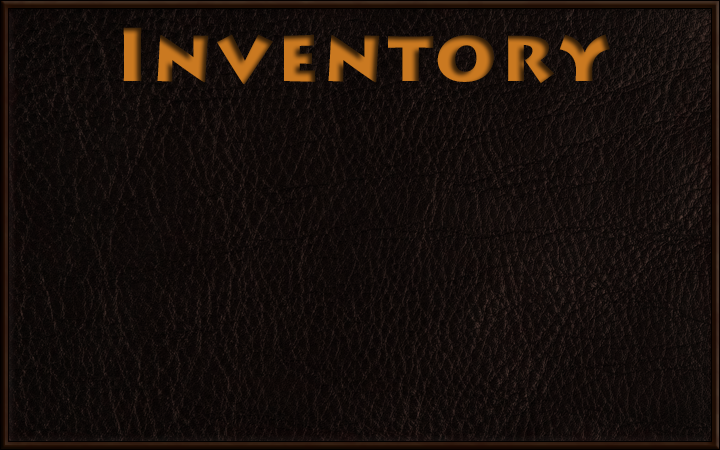
<style>
.page{position:relative;width:720px;height:450px}
.page>*{position:absolute;margin:0}
.t1{font:75px "LithosPro-Black";letter-spacing:0.06em}
</style>
<div class="page">
<p class="t1" style="left:123px;top:27px;width:487px;height:57px">Inventory</p>
</div>
